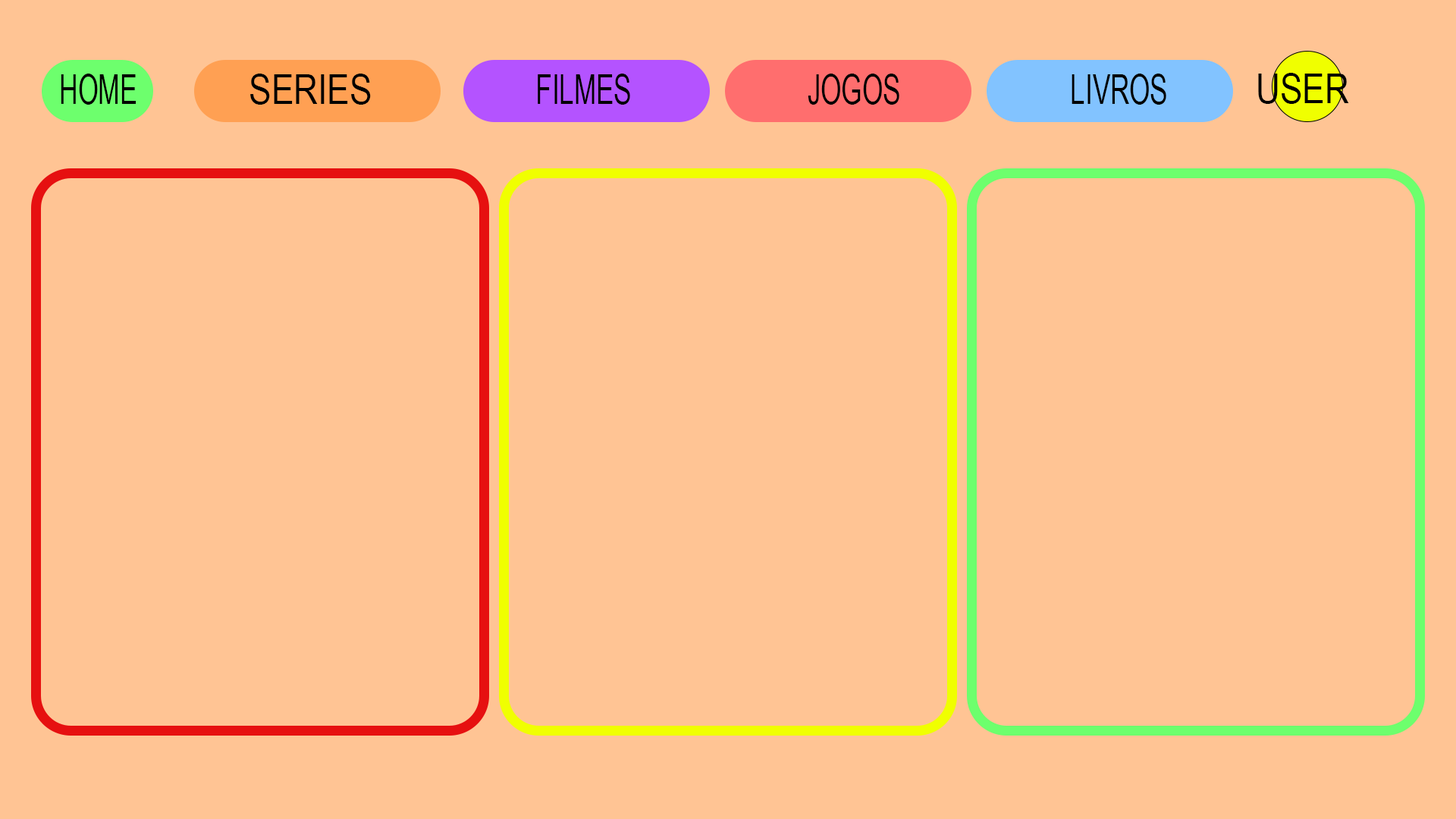
<style>
.page{position:relative;width:1456px;height:819px;background:#ffc494}
.page>*{position:absolute;margin:0}
.t1{font:40.9px "ArialNarrow";color:#000000;text-transform:uppercase;scale:0.77 1}
.t2{font:40.9px "ArialNarrow";color:#000000;text-transform:uppercase}
.t3{font:40.9px "ArialNarrow";color:#000000;text-transform:uppercase;scale:0.79 1}
</style>
<div class="page">
<p class="t1" style="left:61px;top:74px;width:75px;height:31px">homere</p>
<p class="t2" style="left:250px;top:74px;width:121px;height:31px">series</p>
<p class="t3" style="left:538px;top:74px;width:92px;height:31px">filmes</p>
<p class="t3" style="left:808px;top:74px;width:91px;height:31px">jogos</p>
<p class="t3" style="left:1072px;top:74px;width:94px;height:31px">livros</p>
<p class="t2" style="left:1258px;top:73px;width:91px;height:31px">user</p>
</div>
